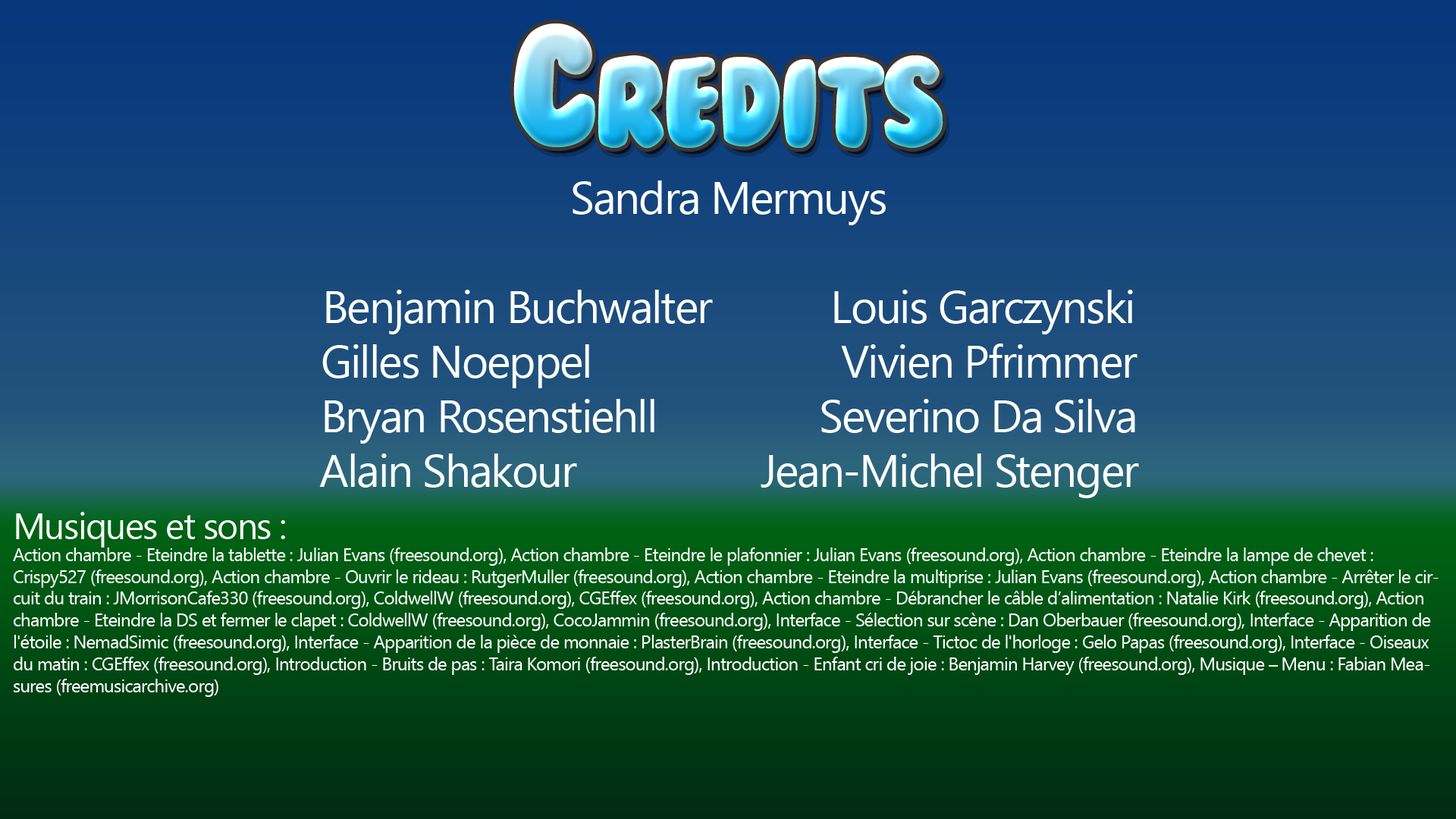
<style>
.page{position:relative;width:1456px;height:819px}
.page>*{position:absolute;margin:0}
.t1{font:117.5px "BubbleGum";letter-spacing:-0.035em}
.t2{font:157.7px "BubbleGum";letter-spacing:-0.035em}
.t3{font:45.5px "SegoeUI";letter-spacing:-0.035em;color:#ffffff}
.t4{font:18.2px "SegoeUI";letter-spacing:-0.035em;color:#ffffff}
.t5{font:36.4px "SegoeUI";letter-spacing:-0.035em;color:#ffffff}
</style>
<div class="page">
<p class="t1" style="left:513px;top:23px;width:430px;height:126px"><span class="t2">C</span>redits</p>
<p class="t3" style="left:319px;top:180px;width:820px;height:318px;text-align:center">Sandra Mermuys<br><br>Benjamin Buchwalter           Louis Garczynski<br>Gilles Noeppel                       Vivien Pfrimmer<br>Bryan Rosenstiehll               Severino Da Silva<br>Alain Shakour                 Jean-Michel Stenger</p>
<p class="t4" style="left:13px;top:512px;width:1426px;height:185px"><span class="t5">Musiques et sons :<br></span>Action chambre - Eteindre la tablette : Julian Evans (freesound.org), Action chambre - Eteindre le plafonnier : Julian Evans (freesound.org), Action chambre - Eteindre la lampe de chevet : Crispy527 (freesound.org), Action chambre - Ouvrir le rideau : RutgerMuller (freesound.org), Action chambre - Eteindre la multiprise : Julian Evans (freesound.org), Action chambre - Arrêter le circuit du train : JMorrisonCafe330 (freesound.org), ColdwellW (freesound.org), CGEffex (freesound.org), Action chambre - Débrancher le câble d’alimentation : Natalie Kirk (freesound.org), Action chambre - Eteindre la DS et fermer le clapet : ColdwellW (freesound.org), CocoJammin (freesound.org), Interface - Sélection sur scène : Dan Oberbauer (freesound.org), Interface - Apparition de l'étoile : NemadSimic (freesound.org), Interface - Apparition de la pièce de monnaie : PlasterBrain (freesound.org), Interface - Tictoc de l'horloge : Gelo Papas (freesound.org), Interface - Oiseaux du matin : CGEffex (freesound.org), Introduction - Bruits de pas : Taira Komori (freesound.org), Introduction - Enfant cri de joie : Benjamin Harvey (freesound.org), Musique – Menu : Fabian Measures (freemusicarchive.org)</p>
</div>
